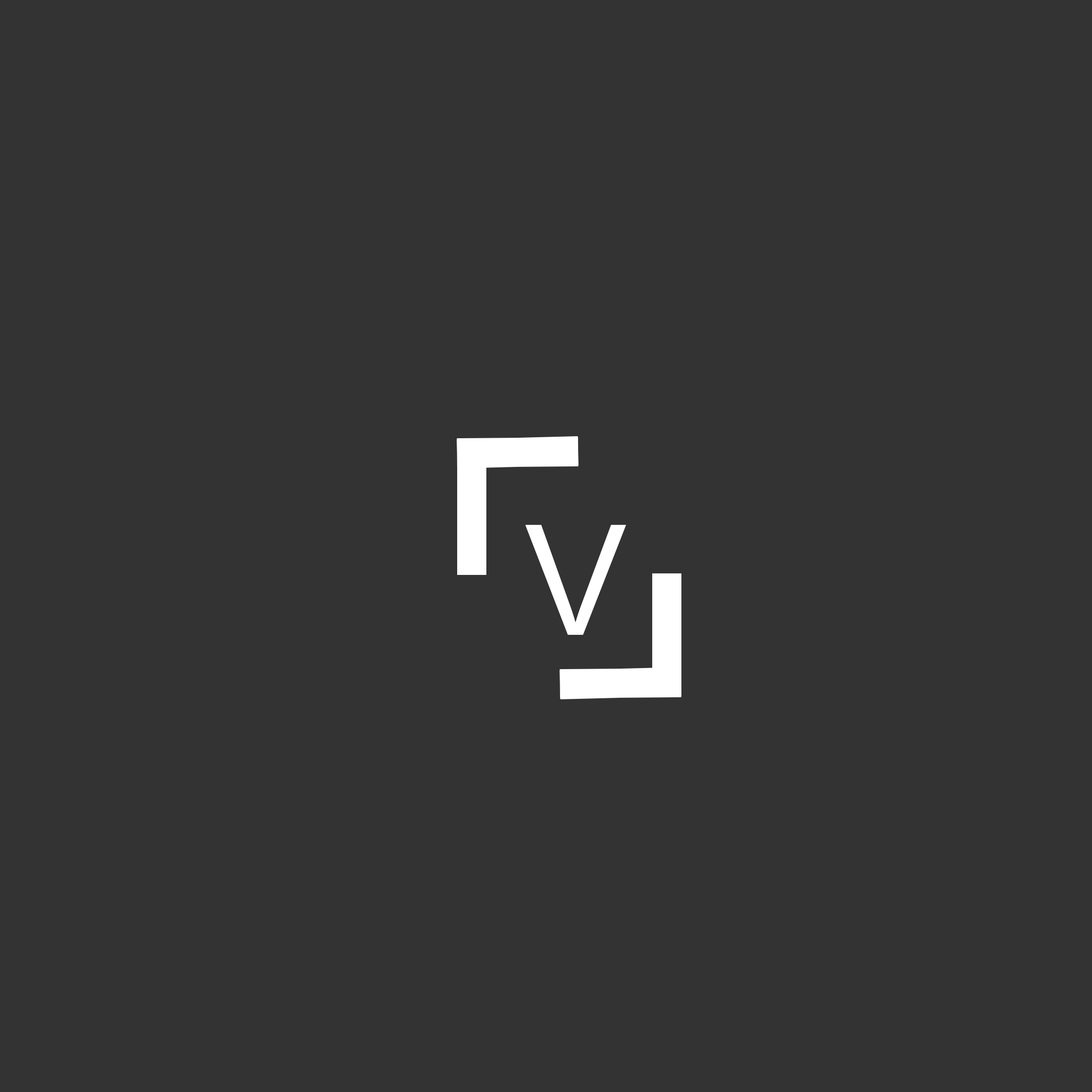
<style>
.page{position:relative;width:1092px;height:1092px;background:#333333}
.page>*{position:absolute;margin:0}
.t1{font:153.6px "ArialMT";color:#ffffff}
</style>
<div class="page">
<p class="t1" style="left:525px;top:525px;width:101px;height:110px">V</p>
</div>
